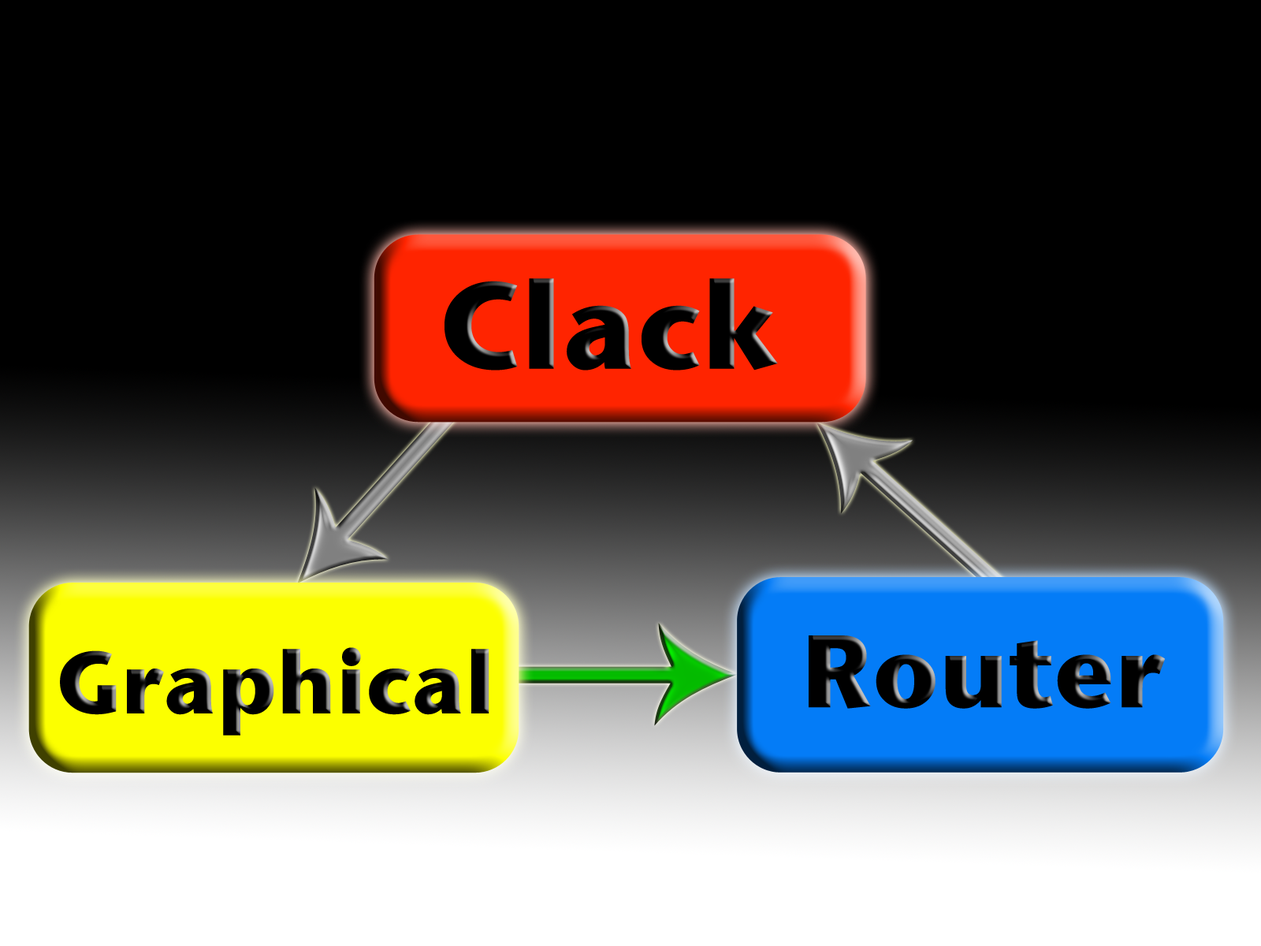
<style>
.page{position:relative;width:1261px;height:946px;background:#000000}
.page>*{position:absolute;margin:0}
.t1{font:122.6px "StoneSansITCTTBold";color:#000000}
.t2{font:102.4px "StoneSansITCTTBold";color:#000000}
.t3{font:87.5px "StoneSansITCTTBold";color:#000000}
</style>
<div class="page">
<p class="t1" style="left:444px;top:278px;width:334px;height:92px">Clack</p>
<p class="t2" style="left:809px;top:635px;width:356px;height:73px">Router</p>
<p class="t3" style="left:60px;top:647px;width:429px;height:88px">Graphical</p>
</div>
